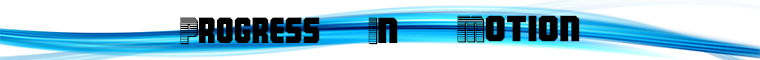
<style>
.page{position:relative;width:760px;height:60px;background:#ffffff}
.page>*{position:absolute;margin:0}
.t1{font:36px "ArmyRangers";color:#000000}
.t2{font:36px "ArmyRangersChrome";color:#000000}
.t3{font:36px "ArmyRangersExpanded";color:#000000}
</style>
<div class="page">
<p class="t1" style="left:180px;top:17px;width:140px;height:28px"><span class="t2">p</span>rogress</p>
<p class="t2" style="left:368px;top:17px;width:30px;height:28px">i<span class="t3">n</span></p>
<p class="t3" style="left:457px;top:15px;width:123px;height:28px"><span class="t2">m</span>otion</p>
</div>
